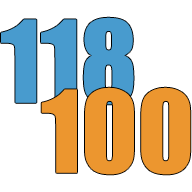
<style>
.page{position:relative;width:192px;height:192px;background:#ffffff}
.page>*{position:absolute;margin:0}
.t1{font:105px "Impact";color:#489bce}
.t2{font:105px "Impact";color:#ec962f}
</style>
<div class="page">
<p class="t1" style="left:1px;top:17px;width:133px;height:88px">118</p>
<p class="t2" style="left:41px;top:87px;width:150px;height:88px">100</p>
</div>
